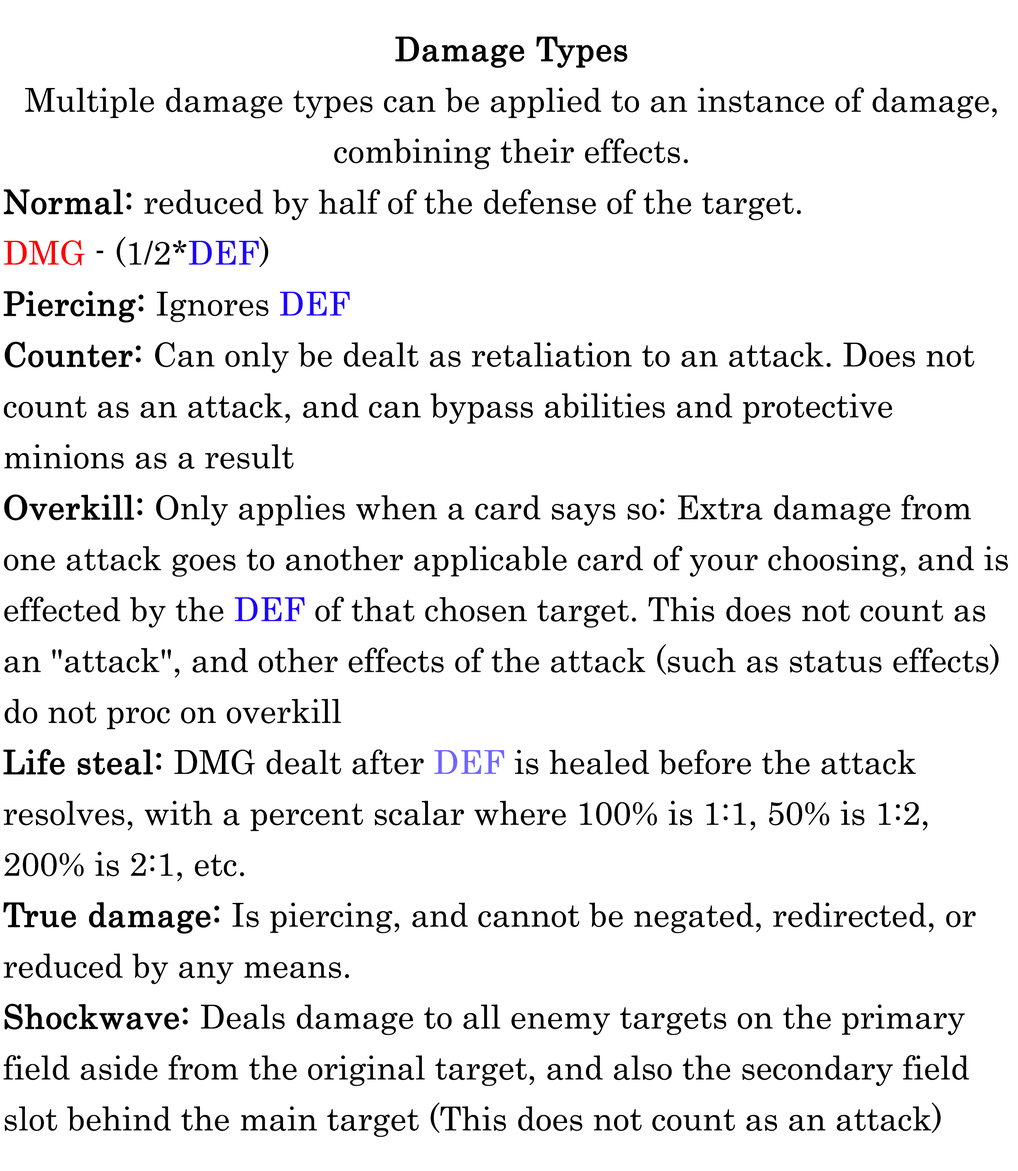
<style>
.page{position:relative;width:1018px;height:1171px;background:#ffffff}
.page>*{position:absolute;margin:0}
.t1{font:56.6px/50.9px "Century";color:#000000}
.t2{font:56.6px/50.9px "Century";color:#000000;font-weight:bold}
.t3{font:56.6px/50.9px "Century";color:#ff0000}
.t4{font:56.6px/50.9px "Century";color:#1e00ff}
.t5{font:56.6px/50.9px "Century";color:#7066ff}
</style>
<div class="page">
<p class="t1" style="left:3px;top:36px;width:1006px;height:1101px;text-align:center"><span class="t2">Damage Types<br></span>Multiple damage types can be applied to an instance of damage, combining their effects.<br><span class="t2">Normal:</span> reduced by half of the defense of the target. <br><span class="t3">DMG</span> - (1/2*<span class="t4">DEF</span>)<br><span class="t2">Piercing:</span> Ignores <span class="t4">DEF<br></span><span class="t2">Counter:</span> Can only be dealt as retaliation to an attack. Does not count as an attack, and can bypass abilities and protective minions as a result<br><span class="t2">Overkill:</span> Only applies when a card says so: Extra damage from one attack goes to another applicable card of your choosing, and is effected by the <span class="t4">DEF</span> of that chosen target. This does not count as an "attack", and other effects of the attack (such as status effects) do not proc on overkill<br><span class="t2">Life steal:</span> DMG dealt after <span class="t5">DEF</span> is healed before the attack resolves, with a percent scalar where 100% is 1:1, 50% is 1:2, 200% is 2:1, etc.<br><span class="t2">True damage:</span> Is piercing, and cannot be negated, redirected, or reduced by any means.<br><span class="t2">Shockwave:</span> Deals damage to all enemy targets on the primary field aside from the original target, and also the secondary field slot behind the main target (This does not count as an attack)</p>
</div>
